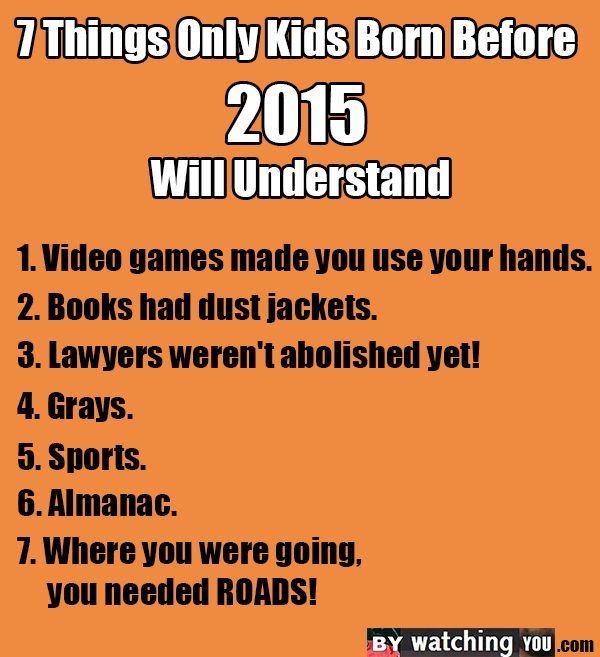
<style>
.page{position:relative;width:600px;height:657px;background:#ee8b41}
.page>*{position:absolute;margin:0}
.t1{font:45.2px "Impact";color:#ffffff}
.t2{font:72px "Impact";color:#ffffff}
.t3{font:34.3px "Impact";color:#000000}
.t4{font:18.8px "Impact";color:#000000}
</style>
<div class="page">
<p class="t1" style="left:17px;top:19px;width:558px;height:178px;text-align:center">7 Things Only Kids Born Before <br><span class="t2">2015</span> <br>Will Understand</p>
<p class="t3" style="left:17px;top:244px;width:575px;height:30px">1. Video games made you use your hands.</p>
<p class="t3" style="left:17px;top:293px;width:360px;height:30px">2. Books had dust jackets.</p>
<p class="t3" style="left:18px;top:341px;width:462px;height:30px">3. Lawyers weren't abolished yet!</p>
<p class="t3" style="left:17px;top:392px;width:116px;height:30px">4. Grays.</p>
<p class="t3" style="left:18px;top:443px;width:128px;height:30px">5. Sports.</p>
<p class="t3" style="left:18px;top:489px;width:159px;height:27px">6. Almanac.</p>
<p class="t3" style="left:17px;top:537px;width:345px;height:71px">7. Where you were going, <br>     you needed ROADS!</p>
<p class="t4" style="left:557px;top:640px;width:37px;height:12px">.com</p>
</div>
